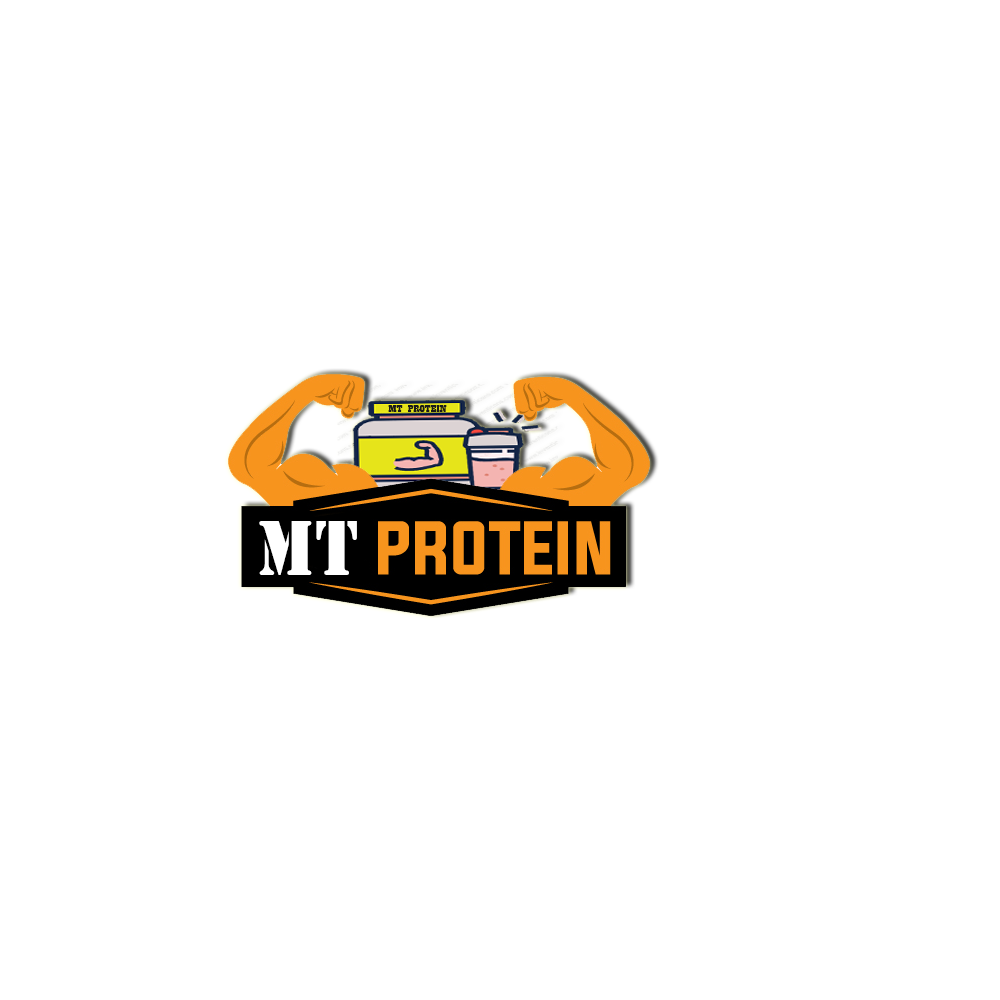
<style>
.page{position:relative;width:1000px;height:1000px;background:#ffffff}
.page>*{position:absolute;margin:0}
.t1{font:11.1px "Playbill";color:#1b1b1a;scale:1.62 1}
.t2{font:81.2px "Stencil";color:#ffffff;scale:0.9 1}
.t3{font:81.2px "GoudyStout";color:#ffffff;scale:0.9 1}
</style>
<div class="page">
<p class="t1" style="left:388px;top:405px;width:59px;height:7px">MT PROTEIN</p>
<p class="t2" style="left:259px;top:521px;width:98px;height:54px"><span class="t3">  </span>MT</p>
</div>
